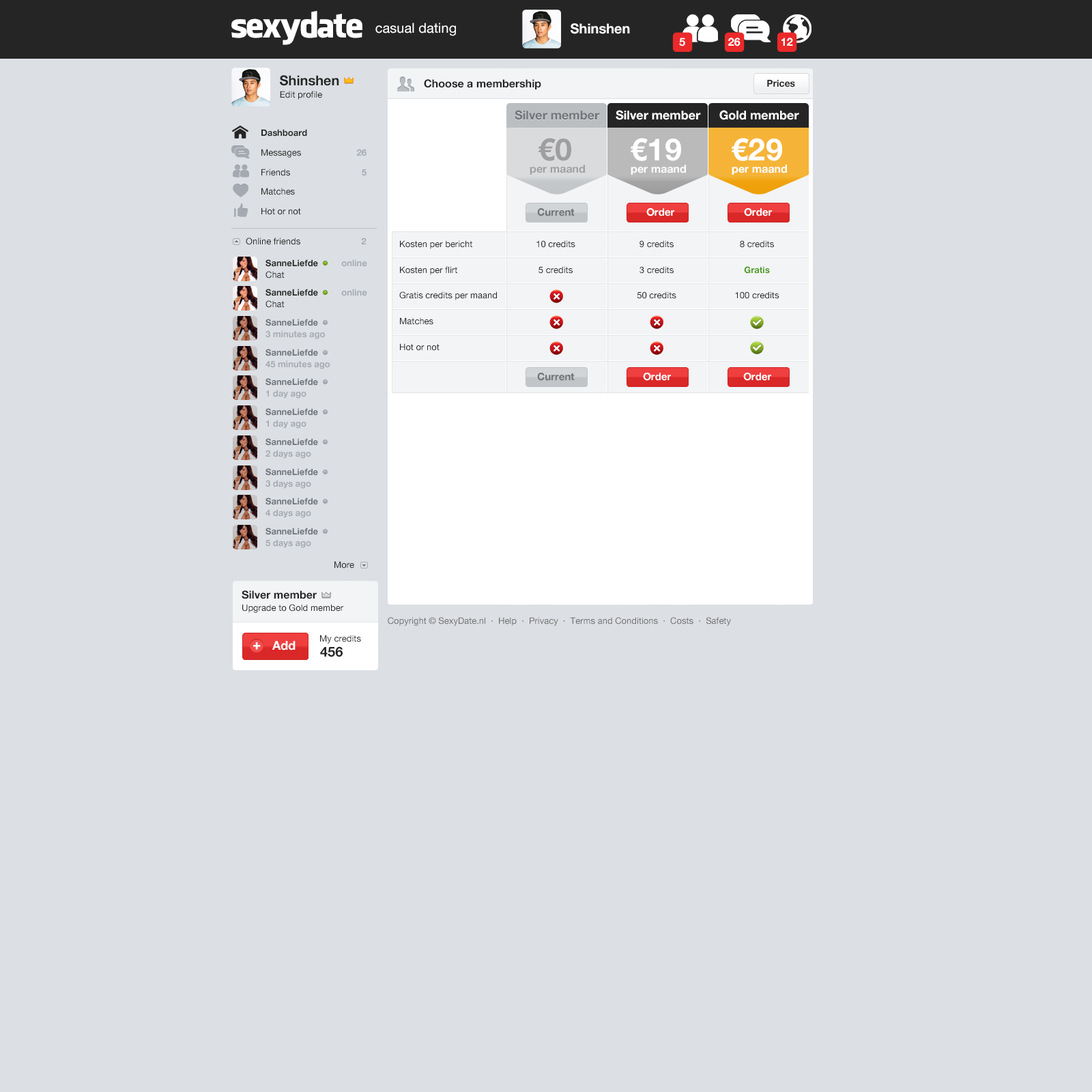
<style>
.page{position:relative;width:1092px;height:1092px;background:#dcdfe3}
.page>*{position:absolute;margin:0}
.t1{font:34.1px "FacebookLetterFaces";letter-spacing:-0.05em;color:#ffffff}
.t2{font:13.6px "HelveticaNeue";color:#ffffff}
.t3{font:13.6px "HelveticaNeue-Bold";color:#ffffff}
.t4{font:10.9px "HelveticaNeue-Bold";color:#ffffff}
.t5{font:13.6px "HelveticaNeue-Bold";color:#252525}
.t6{font:10.9px "HelveticaNeue-Bold";color:#252525}
.t7{font:9.6px "HelveticaNeue-Bold";color:#252525}
.t8{font:8.9px "HelveticaNeue";color:#252525}
.t9{font:12.3px "HelveticaNeue-Bold";color:#707579}
.t10{font:12.3px "HelveticaNeue-Bold";color:#ffffff}
.t11{font:8.9px/19.7px "HelveticaNeue";color:#252525}
.t12{font:8.9px/19.7px "HelveticaNeue-Bold";color:#252525}
.t13{font:30.7px "HelveticaNeue-Bold";color:#9f9f9f}
.t14{font:30.7px "HelveticaNeue-Bold";color:#ffffff}
.t15{font:8.9px/19.7px "HelveticaNeue-Bold";color:#a5aab2}
.t16{font:10.9px "HelveticaNeue-Bold";color:#9f9f9f}
.t17{font:10.2px "HelveticaNeue-Bold";color:#707579}
.t18{font:10.2px "HelveticaNeue-Bold";color:#ffffff}
.t19{font:8.9px "HelveticaNeue-Bold";color:#a5aab2}
.t20{font:8.9px/25.7px "HelveticaNeue";color:#252525}
.t21{font:8.9px/25.7px "HelveticaNeue-Bold";color:#489917}
.t22{font:8.9px/11.6px "HelveticaNeue-Bold";color:#252525}
.t23{font:8.9px/11.6px "HelveticaNeue-Bold";color:#a5aab2}
.t24{font:8.9px/11.6px "HelveticaNeue";color:#252525}
.t25{font:8.9px/11.6px "HelveticaNeue-Bold";color:#6d727b}
.t26{font:8.9px "HelveticaNeue";color:#707070}
.t27{font:13px "HelveticaNeue-Bold";color:#ffffff;font-weight:bold}
</style>
<div class="page">
<p class="t1" style="left:231px;top:11px;width:131px;height:34px">sexydate</p>
<p class="t2" style="left:375px;top:23px;width:81px;height:13px">casual dating</p>
<p class="t3" style="left:571px;top:23px;width:59px;height:11px">Shinshen</p>
<p class="t4" style="left:679px;top:38px;width:6px;height:8px">5</p>
<p class="t4" style="left:728px;top:38px;width:13px;height:8px">26</p>
<p class="t4" style="left:781px;top:38px;width:12px;height:8px">12</p>
<p class="t5" style="left:280px;top:75px;width:59px;height:11px">Shinshen</p>
<p class="t6" style="left:424px;top:79px;width:117px;height:10px">Choose a membership</p>
<p class="t7" style="left:767px;top:80px;width:28px;height:7px">Prices</p>
<p class="t8" style="left:280px;top:91px;width:42px;height:9px">Edit profile</p>
<p class="t9" style="left:515px;top:110px;width:85px;height:10px">Silver member</p>
<p class="t10" style="left:616px;top:110px;width:85px;height:10px">Silver member</p>
<p class="t10" style="left:719px;top:110px;width:80px;height:10px">Gold member</p>
<p class="t11" style="left:261px;top:129px;width:46px;height:86px"><span class="t12">Dashboard<br></span>Messages<br>Friends<br>Matches<br>Hot or not</p>
<p class="t13" style="left:538px;top:138px;width:33px;height:23px">€0</p>
<p class="t14" style="left:630px;top:138px;width:51px;height:23px">€19</p>
<p class="t14" style="left:731px;top:138px;width:51px;height:23px">€29</p>
<p class="t15" style="left:357px;top:149px;width:9px;height:27px;text-align:right">26<br>5</p>
<p class="t16" style="left:530px;top:164px;width:55px;height:11px">per maand</p>
<p class="t4" style="left:631px;top:164px;width:55px;height:11px">per maand</p>
<p class="t4" style="left:732px;top:164px;width:55px;height:11px">per maand</p>
<p class="t17" style="left:537px;top:208px;width:38px;height:8px">Current</p>
<p class="t18" style="left:646px;top:208px;width:28px;height:8px">Order</p>
<p class="t18" style="left:744px;top:208px;width:28px;height:8px">Order</p>
<p class="t8" style="left:246px;top:238px;width:120px;height:7px">Online friends      <span class="t19">2</span></p>
<p class="t20" style="left:399px;top:240px;width:98px;height:111px">Kosten per bericht <br>Kosten per flirt<br>Gratis credits per maand<br>Matches<br>Hot or not</p>
<p class="t20" style="left:536px;top:240px;width:39px;height:108px;text-align:center">10 credits<br>5 credits<br>-<br>-<br>-</p>
<p class="t20" style="left:637px;top:240px;width:39px;height:108px;text-align:center">9 credits<br>3 credits<br>50 credits<br>-<br>-</p>
<p class="t20" style="left:735px;top:240px;width:44px;height:108px;text-align:center">8 credits<br><span class="t21">Gratis<br></span>100 credits<br>-<br>-</p>
<p class="t22" style="left:265px;top:259px;width:102px;height:19px">SanneLiefde          <span class="t23">online<br></span><span class="t24">Chat</span></p>
<p class="t22" style="left:265px;top:289px;width:102px;height:19px">SanneLiefde          <span class="t23">online<br></span><span class="t24">Chat</span></p>
<p class="t23" style="left:265px;top:319px;width:60px;height:20px"><span class="t25">SanneLiefde<br></span>3 minutes ago</p>
<p class="t23" style="left:265px;top:349px;width:65px;height:20px"><span class="t25">SanneLiefde<br></span>45 minutes ago</p>
<p class="t17" style="left:537px;top:373px;width:38px;height:8px">Current</p>
<p class="t18" style="left:643px;top:373px;width:28px;height:8px">Order</p>
<p class="t18" style="left:743px;top:373px;width:28px;height:8px">Order</p>
<p class="t25" style="left:265px;top:378px;width:53px;height:21px">SanneLiefde<br><span class="t23">1 day ago</span></p>
<p class="t25" style="left:265px;top:408px;width:53px;height:21px">SanneLiefde<br><span class="t23">1 day ago</span></p>
<p class="t25" style="left:265px;top:438px;width:53px;height:21px">SanneLiefde<br><span class="t23">2 days ago</span></p>
<p class="t25" style="left:265px;top:468px;width:53px;height:21px">SanneLiefde<br><span class="t23">3 days ago</span></p>
<p class="t25" style="left:265px;top:498px;width:53px;height:20px">SanneLiefde<br><span class="t23">4 days ago</span></p>
<p class="t25" style="left:265px;top:528px;width:53px;height:20px">SanneLiefde<br><span class="t23">5 days ago</span></p>
<p class="t8" style="left:334px;top:561px;width:20px;height:8px">More</p>
<p class="t6" style="left:242px;top:590px;width:75px;height:9px">Silver member</p>
<p class="t8" style="left:242px;top:604px;width:101px;height:9px">Upgrade to Gold member</p>
<p class="t26" style="left:388px;top:617px;width:343px;height:9px">Copyright © SexyDate.nl  ·  Help  ·  Privacy  ·  Terms and Conditions  ·  Costs  ·  Safety</p>
<p class="t10" style="left:272px;top:641px;width:24px;height:9px">Add</p>
<p class="t8" style="left:320px;top:635px;width:41px;height:9px">My credits</p>
<p class="t27" style="left:253px;top:642px;width:8px;height:8px">+</p>
<p class="t5" style="left:320px;top:646px;width:23px;height:11px">456</p>
</div>
